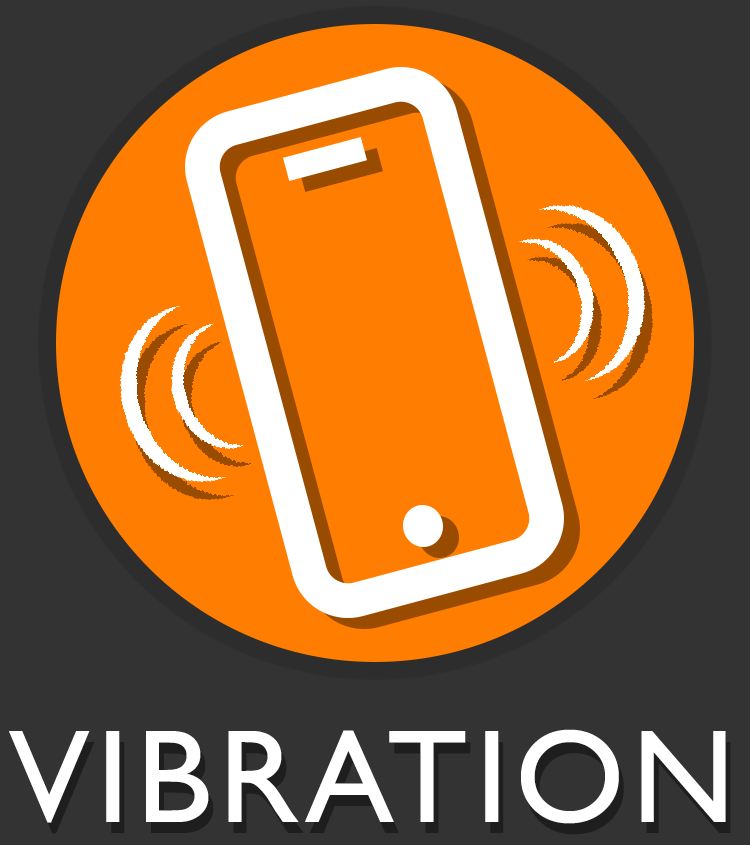
<style>
.page{position:relative;width:750px;height:845px;background:#333333}
.page>*{position:absolute;margin:0}
.t1{font:133.3px "GillSansMT";letter-spacing:0.05em;color:#ffffff}
</style>
<div class="page">
<p class="t1" style="left:9px;top:729px;width:717px;height:95px">VIBRATION</p>
</div>
